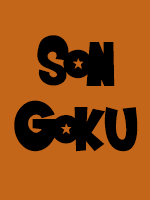
<style>
.page{position:relative;width:150px;height:200px;background:#c4661a}
.page>*{position:absolute;margin:0}
.t1{font:72px "SaiyanSans";color:#000000}
</style>
<div class="page">
<p class="t1" style="left:14px;top:35px;width:124px;height:117px">Son Goku</p>
</div>
